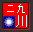
<style>
.page{position:relative;width:33px;height:32px;background:#f20000}
.page>*{position:absolute;margin:0}
.t1{font:10.4px "SimSun";color:#ffffff}
.t2{font:11.7px "SimSun";color:#ffffff}
</style>
<div class="page">
<p class="t1" style="left:7px;top:4px;width:18px;height:9px">二九</p>
<p class="t2" style="left:16px;top:15px;width:11px;height:12px">川</p>
</div>
